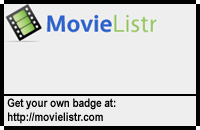
<style>
.page{position:relative;width:200px;height:130px;background:#eeeeee}
.page>*{position:absolute;margin:0}
.t1{font:12px/14px "ArialNarrow-Bold";color:#000000}
</style>
<div class="page">
<p class="t1" style="left:7px;top:98px;width:109px;height:26px">Get your own badge at:<br>http://movielistr.com</p>
</div>
